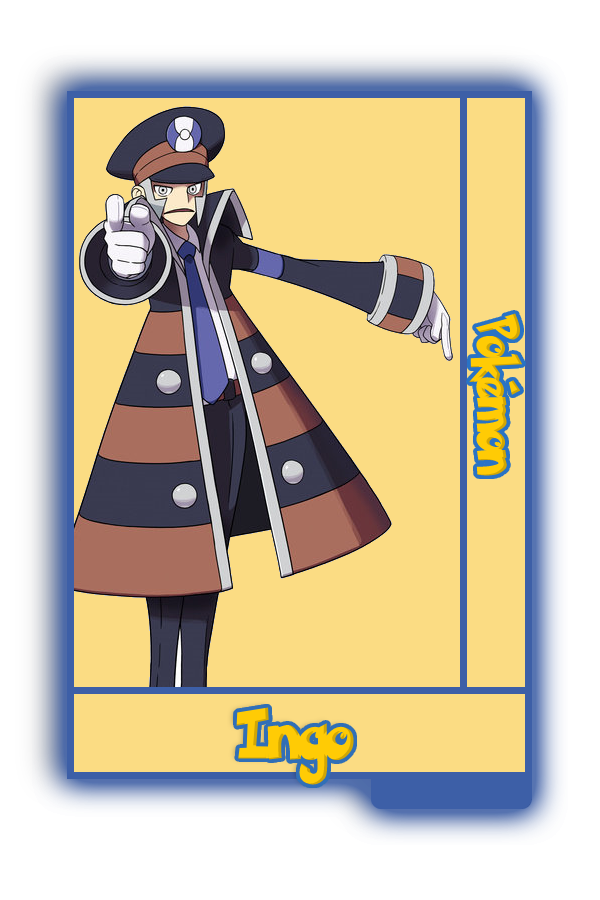
<style>
.page{position:relative;width:600px;height:900px;background:#fbdc83}
.page>*{position:absolute;margin:0}
.t1{font:48.8px "PokemonSolidNormal";color:#ffcb05;scale:0.8 1}
.t2{font:56.6px "PokemonSolidNormal";color:#ffcb05;scale:0.92 1}
</style>
<div class="page">
<p class="t1" style="left:469px;top:313px;width:54px;height:163px;rotate:90deg">Pokémon</p>
<p class="t2" style="left:236px;top:707px;width:118px;height:78px">Ingo</p>
</div>
